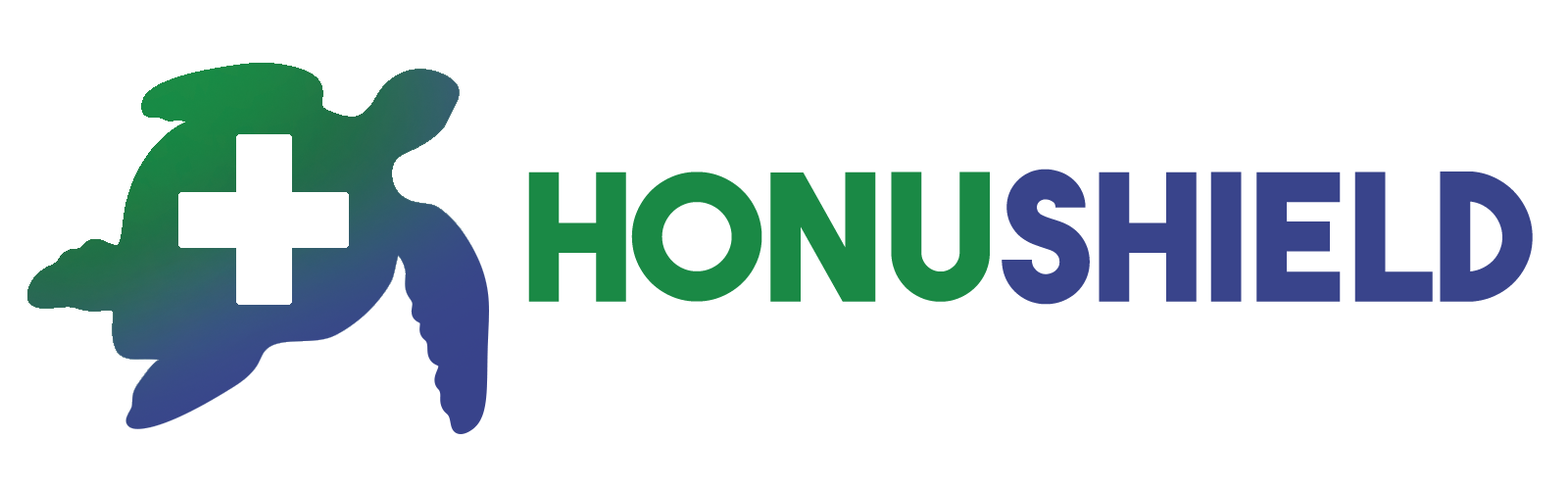
<style>
.page{position:relative;width:1568px;height:490px;background:#ffffff}
.page>*{position:absolute;margin:0}
.t1{font:176.4px "TheBoldFont";color:#39448b}
.t2{font:176.4px "TheBoldFont";color:#1a8945}
</style>
<div class="page">
<p class="t1" style="left:528px;top:169px;width:1005px;height:136px"><span class="t2">Honu</span>Shield</p>
</div>
